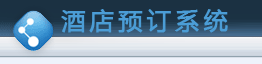
<style>
.page{position:relative;width:262px;height:64px}
.page>*{position:absolute;margin:0}
.t1{font:24px "MicrosoftYaHei";letter-spacing:0.16em;color:#4b9dd6;font-weight:bold}
</style>
<div class="page">
<p class="t1" style="left:61px;top:9px;width:167px;height:24px">酒店预订系统</p>
</div>
